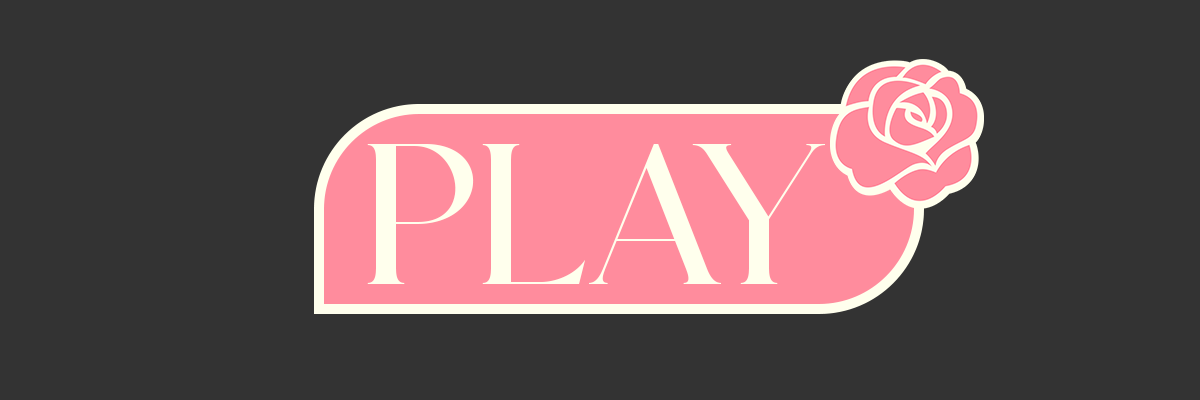
<style>
.page{position:relative;width:1200px;height:400px;background:#333333}
.page>*{position:absolute;margin:0}
.t1{font:200px "BelganAesthetic-Regular";color:#ffffed}
</style>
<div class="page">
<p class="t1" style="left:367px;top:144px;width:458px;height:140px">PLAY</p>
</div>
